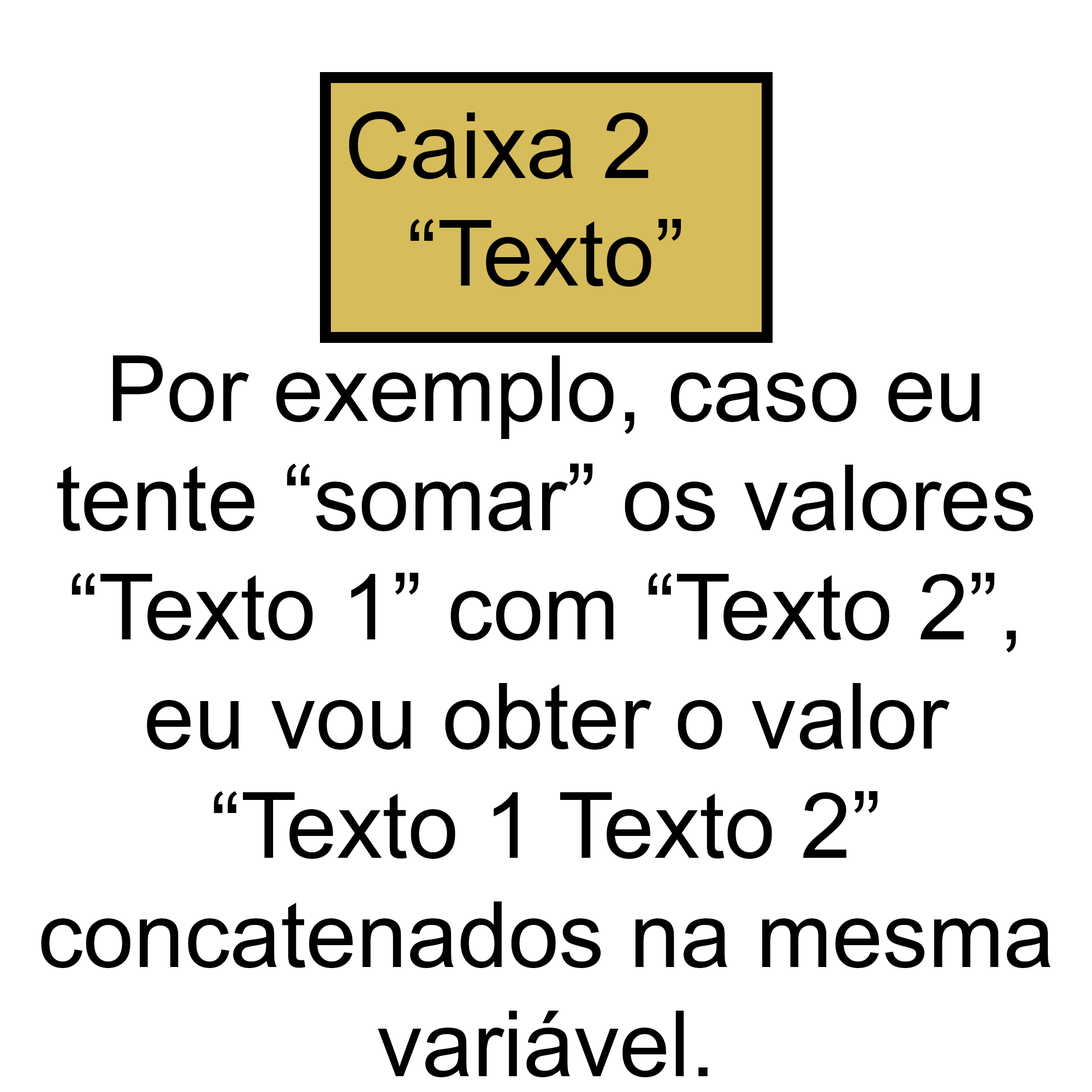
<style>
.page{position:relative;width:1092px;height:1092px;background:#ffffff}
.page>*{position:absolute;margin:0}
.t1{font:91px "ArialMT";color:#000000}
</style>
<div class="page">
<p class="t1" style="left:349px;top:111px;width:300px;height:68px">Caixa 2</p>
<p class="t1" style="left:410px;top:219px;width:271px;height:68px">“Texto”</p>
<p class="t1" style="left:41px;top:355px;width:1009px;height:722px;text-align:center">Por exemplo, caso eu<br>tente “somar” os valores<br>“Texto 1” com “Texto 2”,<br>eu vou obter o valor<br>“Texto 1 Texto 2”<br>concatenados na mesma<br>variável.</p>
</div>
